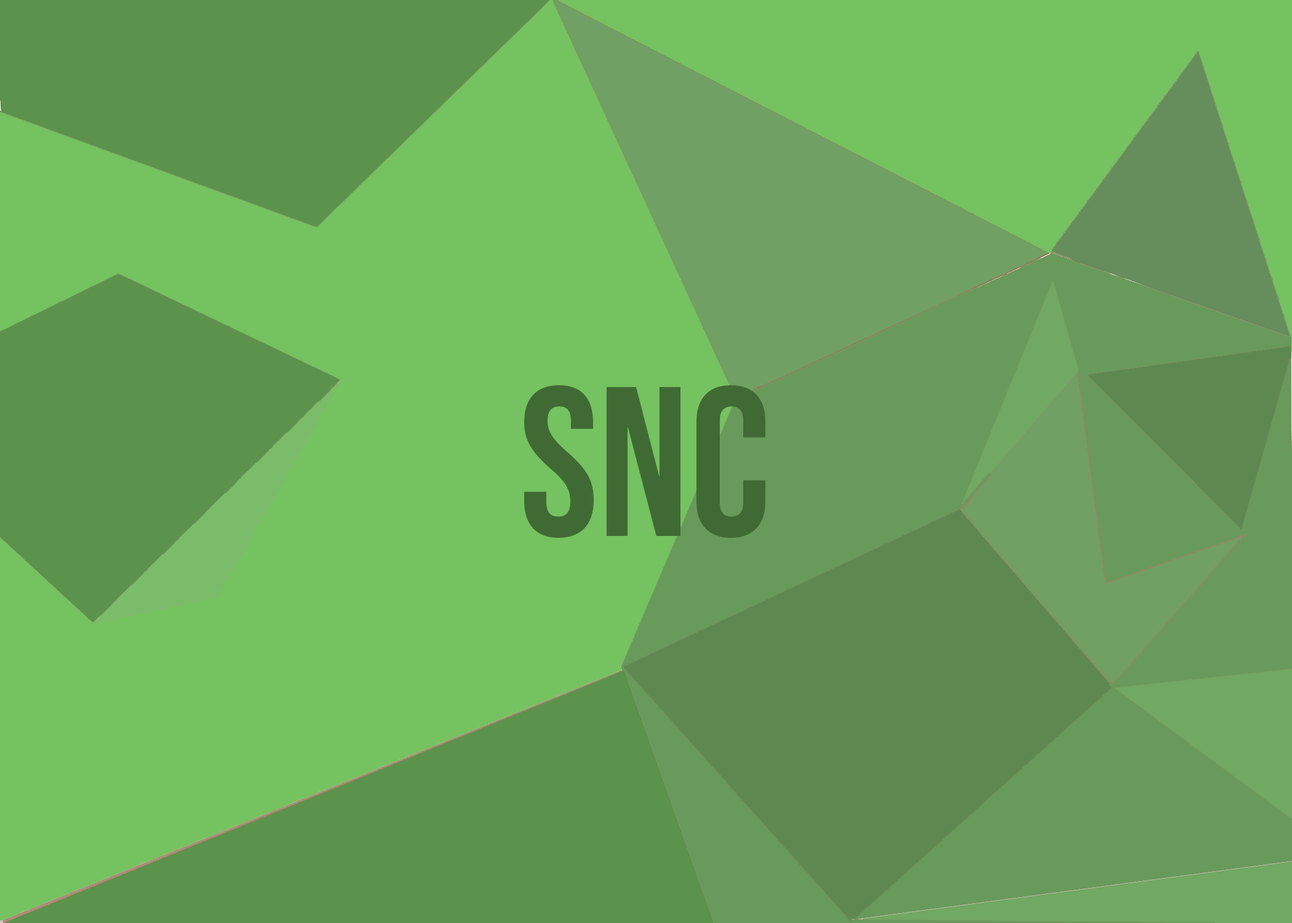
<style>
.page{position:relative;width:1292px;height:923px;background:#75c260}
.page>*{position:absolute;margin:0}
.t1{font:212.8px "BebasNeue-Regular";color:#406a34}
</style>
<div class="page">
<p class="t1" style="left:524px;top:385px;width:241px;height:153px">Snc</p>
</div>
